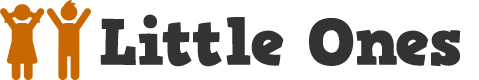
<style>
.page{position:relative;width:479px;height:80px;background:#ffffff}
.page>*{position:absolute;margin:0}
.t1{font:65px "HVDComicSerifPro";letter-spacing:-0.005em;color:#333333}
</style>
<div class="page">
<p class="t1" style="left:100px;top:14px;width:361px;height:53px">Little Ones</p>
</div>
